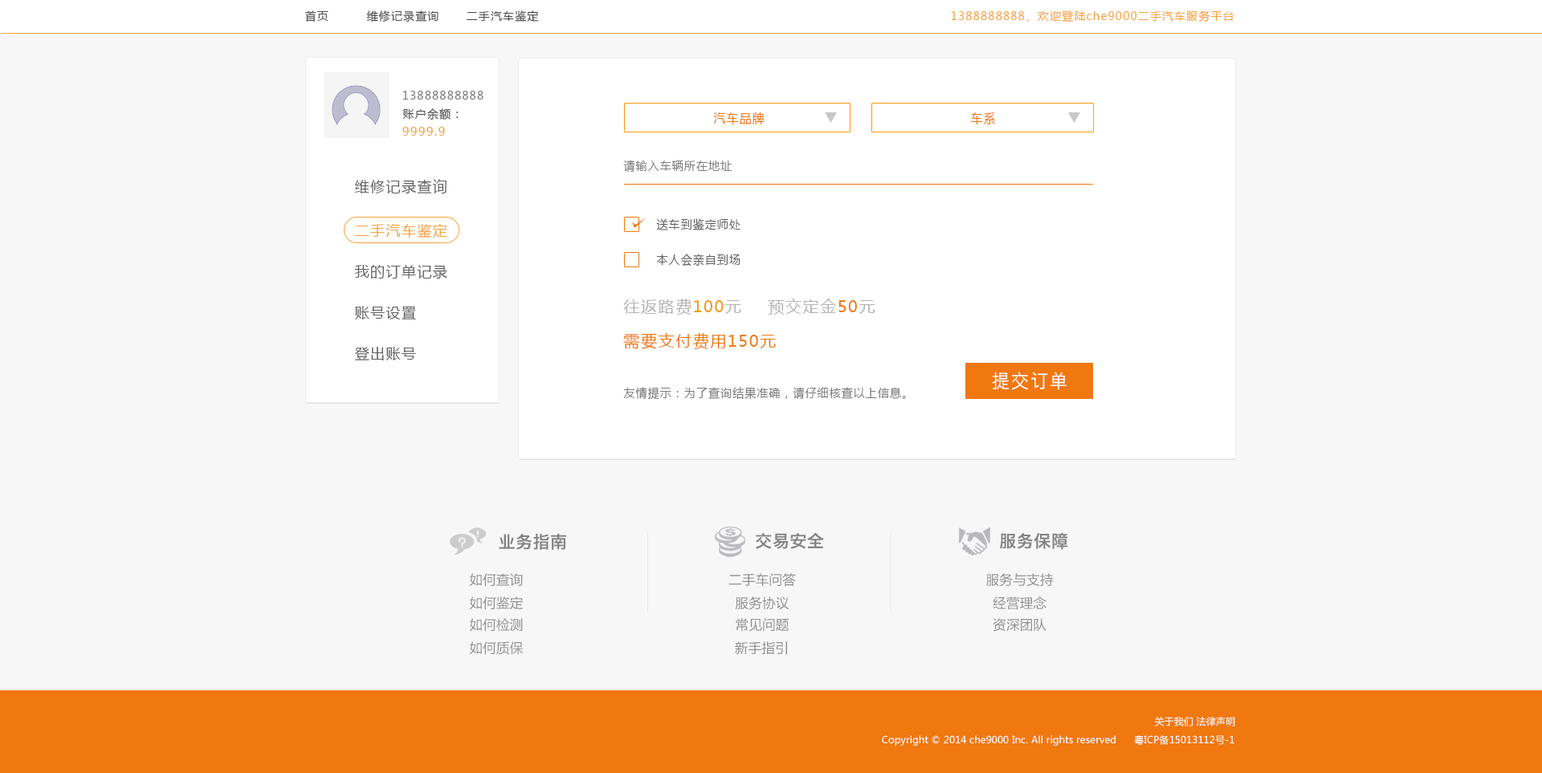
<style>
.page{position:relative;width:1542px;height:773px;background:#f7f7f7}
.page>*{position:absolute;margin:0}
.t1{font:11.2px "MicrosoftYaHei";letter-spacing:0.08em;color:#494949}
.t2{font:11.2px "MicrosoftYaHei";letter-spacing:0.08em;color:#f7a13c}
.t3{font:11.2px "MicrosoftYaHei";letter-spacing:0.08em;color:#787373}
.t4{font:12.8px "MicrosoftYaHei";letter-spacing:0.08em;color:#f0780e;scale:0.93 1}
.t5{font:12px "MicrosoftYaHei";letter-spacing:0.08em;color:#f7a13c}
.t6{font:12px "MicrosoftYaHei";letter-spacing:0.08em;color:#7c7c7c;scale:0.93 1}
.t7{font:14.5px "MicrosoftYaHei";letter-spacing:0.08em;color:#606060}
.t8{font:12px "MicrosoftYaHei";letter-spacing:0.08em;color:#606060;scale:0.93 1}
.t9{font:14.5px "MicrosoftYaHei";letter-spacing:0.08em;color:#f7a13c}
.t10{font:16.1px "MicrosoftYaHei";letter-spacing:0.08em;color:#b5b3b3}
.t11{font:16.1px "MicrosoftYaHei";letter-spacing:0.08em;color:#f29b11}
.t12{font:16.1px "MicrosoftYaHei";letter-spacing:0.08em;color:#f0780e}
.t13{font:19.3px "STHeitiSC-Light";letter-spacing:0.08em;color:#ffffff;scale:0.93 1}
.t14{font:17.1px "HiraginoSansGB-W6";letter-spacing:0.01em;color:#838383}
.t15{font:13.3px "MicrosoftYaHei";letter-spacing:0.01em;color:#909090}
.t16{font:9.6px "MicrosoftYaHei";letter-spacing:0.01em;color:#ffffff}
</style>
<div class="page">
<p class="t1" style="left:305px;top:10px;width:23px;height:12px">首页</p>
<p class="t1" style="left:366px;top:10px;width:72px;height:12px">维修记录查询</p>
<p class="t1" style="left:467px;top:10px;width:71px;height:12px">二手汽车鉴定</p>
<p class="t2" style="left:951px;top:10px;width:283px;height:12px">1388888888、欢迎登陆che9000二手汽车服务平台</p>
<p class="t3" style="left:402px;top:91px;width:81px;height:9px">13888888888</p>
<p class="t1" style="left:402px;top:108px;width:57px;height:12px">账户余额：</p>
<p class="t4" style="left:713px;top:112px;width:52px;height:12px">汽车品牌</p>
<p class="t4" style="left:970px;top:112px;width:25px;height:13px">车系</p>
<p class="t5" style="left:402px;top:127px;width:43px;height:9px">9999.9</p>
<p class="t6" style="left:623px;top:160px;width:109px;height:13px">请输入车辆所在地址</p>
<p class="t7" style="left:355px;top:179px;width:92px;height:15px">维修记录查询</p>
<p class="t8" style="left:656px;top:218px;width:84px;height:12px">送车到鉴定师处</p>
<p class="t9" style="left:355px;top:223px;width:92px;height:15px">二手汽车鉴定</p>
<p class="t8" style="left:656px;top:254px;width:84px;height:13px">本人会亲自到场</p>
<p class="t7" style="left:354px;top:265px;width:93px;height:14px">我的订单记录</p>
<p class="t7" style="left:355px;top:306px;width:61px;height:14px">账号设置</p>
<p class="t10" style="left:623px;top:299px;width:118px;height:16px">往返路费<span class="t11">100</span>元</p>
<p class="t10" style="left:768px;top:299px;width:107px;height:16px">预交定金<span class="t12">50</span>元</p>
<p class="t12" style="left:623px;top:333px;width:153px;height:16px">需要支付费用150元</p>
<p class="t7" style="left:355px;top:347px;width:61px;height:14px">登出账号</p>
<p class="t13" style="left:992px;top:372px;width:74px;height:18px">提交订单</p>
<p class="t6" style="left:623px;top:387px;width:283px;height:13px">友情提示：为了查询结果准确，请仔细核查以上信息。</p>
<p class="t14" style="left:756px;top:533px;width:68px;height:16px">交易安全</p>
<p class="t14" style="left:999px;top:532px;width:69px;height:18px">服务保障</p>
<p class="t14" style="left:499px;top:534px;width:67px;height:16px">业务指南</p>
<p class="t15" style="left:469px;top:573px;width:54px;height:14px">如何查询</p>
<p class="t15" style="left:728px;top:573px;width:68px;height:14px">二手车问答</p>
<p class="t15" style="left:986px;top:573px;width:68px;height:14px">服务与支持</p>
<p class="t15" style="left:469px;top:597px;width:54px;height:13px">如何鉴定</p>
<p class="t15" style="left:735px;top:597px;width:54px;height:13px">服务协议</p>
<p class="t15" style="left:993px;top:597px;width:53px;height:13px">经营理念</p>
<p class="t15" style="left:469px;top:618px;width:54px;height:14px">如何检测</p>
<p class="t15" style="left:736px;top:618px;width:53px;height:14px">常见问题</p>
<p class="t15" style="left:993px;top:618px;width:53px;height:14px">资深团队</p>
<p class="t15" style="left:469px;top:642px;width:54px;height:13px">如何质保</p>
<p class="t15" style="left:735px;top:642px;width:52px;height:13px">新手指引</p>
<p class="t16" style="left:1154px;top:717px;width:81px;height:10px">关于我们 法律声明</p>
<p class="t16" style="left:882px;top:735px;width:352px;height:11px">Copyright © 2014 che9000 Inc. All rights reserved      粤ICP备15013112号-1</p>
</div>
